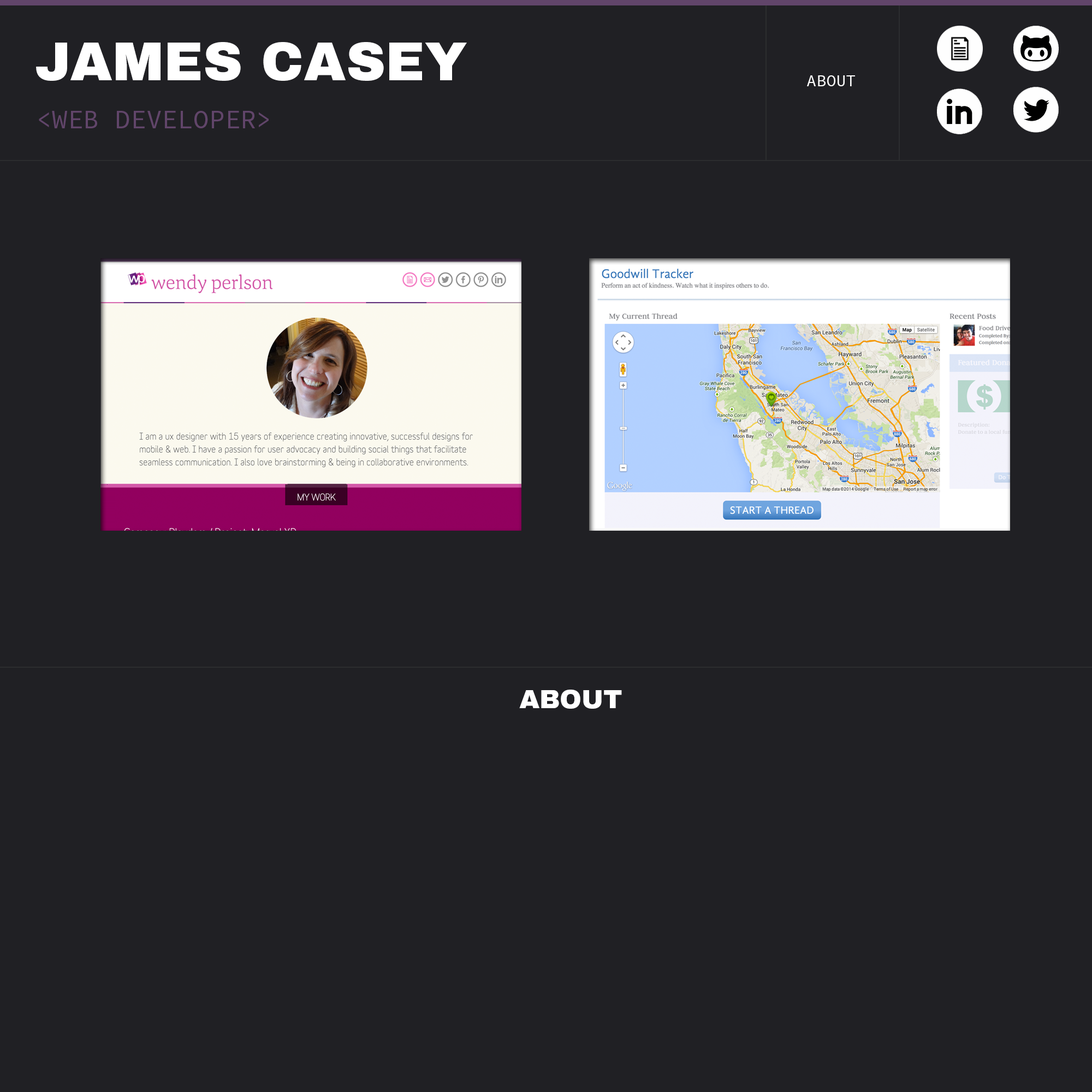
<style>
.page{position:relative;width:1092px;height:1092px;background:#202024}
.page>*{position:absolute;margin:0}
.t1{font:54.6px "Archivo-Black";color:#ffffff}
.t2{font:16.4px "SourceCodePro-Regular";color:#ffffff}
.t3{font:26.2px "SourceCodePro-Regular";color:#61456a}
.t4{font:26.2px "Archivo-Black";color:#ffffff}
</style>
<div class="page">
<p class="t1" style="left:36px;top:42px;width:431px;height:39px">JAMES CASEY</p>
<p class="t2" style="left:807px;top:75px;width:48px;height:11px">ABOUT</p>
<p class="t3" style="left:39px;top:111px;width:230px;height:17px">&lt;WEB DEVELOPER&gt;</p>
<p class="t4" style="left:519px;top:690px;width:103px;height:19px">ABOUT</p>
</div>
